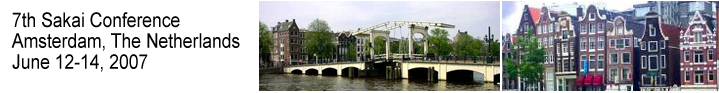
<style>
.page{position:relative;width:719px;height:93px;background:#ffffff}
.page>*{position:absolute;margin:0}
.t1{font:20px/20.8px "ArialMT";color:#010000;scale:0.87 1}
</style>
<div class="page">
<p class="t1" style="left:11px;top:12px;width:229px;height:60px">7th Sakai Conference<br>Amsterdam, The Netherlands<br>June 12-14, 2007</p>
</div>
